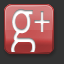
<style>
.page{position:relative;width:64px;height:64px;background:#333333}
.page>*{position:absolute;margin:0}
.t1{font:78px "PrestigeEliteStd-Bd";scale:0.7 1}
.t2{font:51.3px "PTSans-Regular";scale:0.7 1}
</style>
<div class="page">
<p class="t1" style="left:11px;top:9px;width:25px;height:50px">g</p>
<p class="t2" style="left:34px;top:11px;width:16px;height:21px">+</p>
</div>
